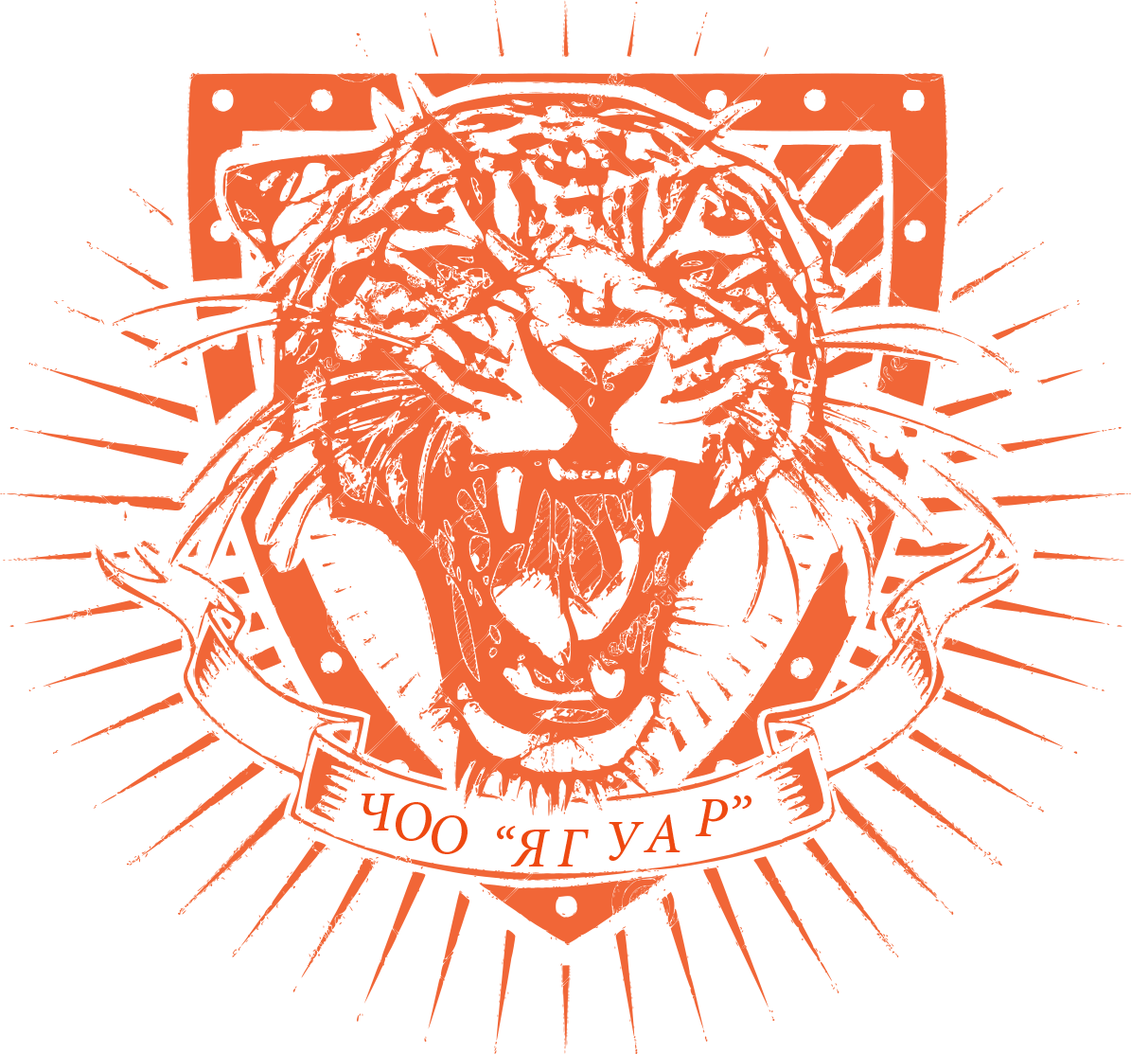
<style>
.page{position:relative;width:1131px;height:1054px;background:#ffffff}
.page>*{position:absolute;margin:0}
.t1{font:56.8px "MinionPro-MediumIt";color:#ee4911}
</style>
<div class="page">
<p class="t1" style="left:361px;top:793px;width:34px;height:37px">Ч</p>
<p class="t1" style="left:695px;top:795px;width:57px;height:41px">Р”</p>
<p class="t1" style="left:396px;top:802px;width:36px;height:39px">О</p>
<p class="t1" style="left:432px;top:815px;width:36px;height:39px">О</p>
<p class="t1" style="left:609px;top:822px;width:36px;height:39px">У</p>
<p class="t1" style="left:644px;top:814px;width:37px;height:38px">А</p>
<p class="t1" style="left:497px;top:826px;width:53px;height:40px">“Я</p>
<p class="t1" style="left:558px;top:829px;width:31px;height:37px">Г</p>
</div>
